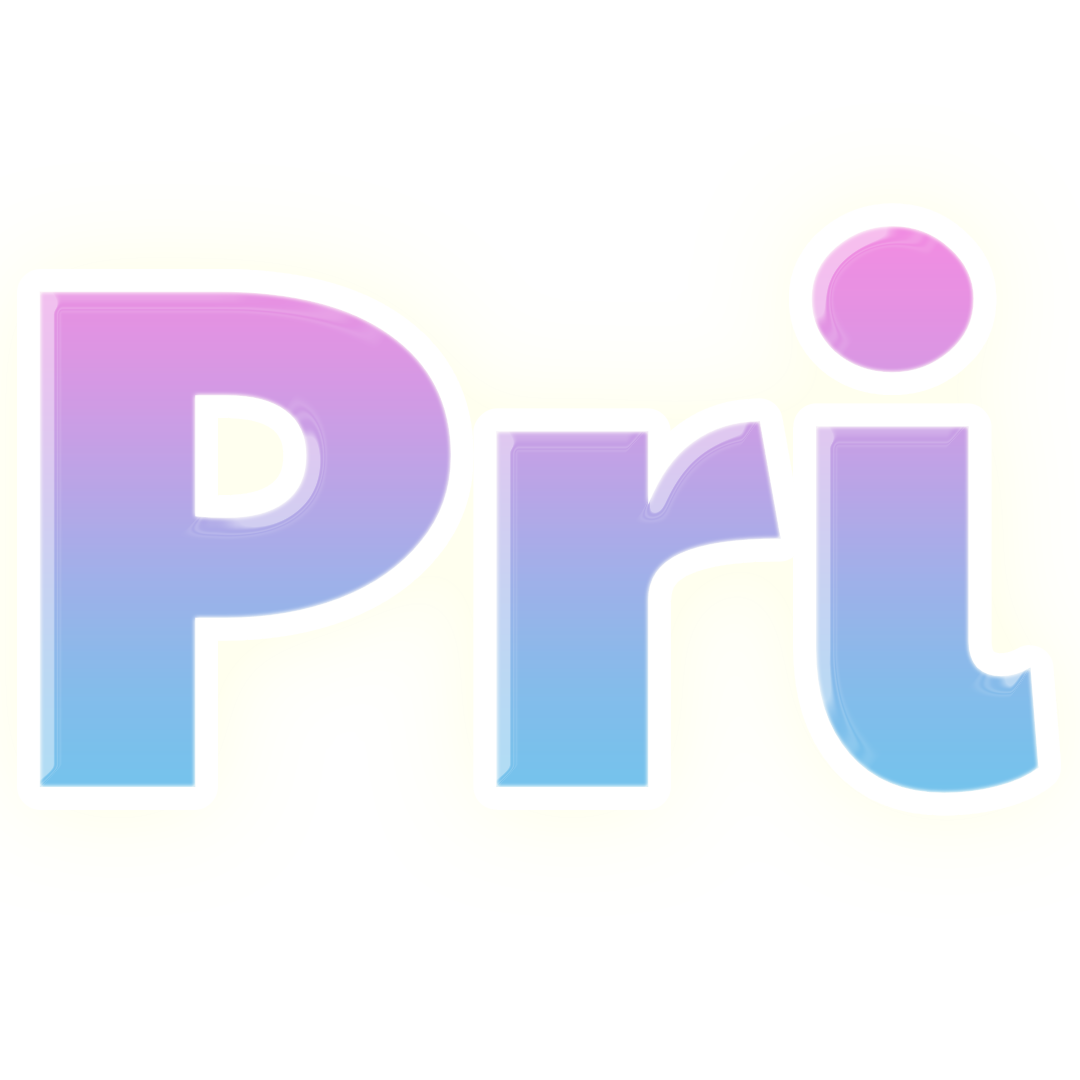
<style>
.page{position:relative;width:1080px;height:1080px;background:#ffffff}
.page>*{position:absolute;margin:0}
.t1{font:720px "PaytoneOne-Regular"}
</style>
<div class="page">
<p class="t1" style="left:39px;top:226px;width:1000px;height:567px">Pri</p>
</div>
